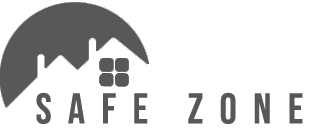
<style>
.page{position:relative;width:320px;height:132px;background:#ffffff}
.page>*{position:absolute;margin:0}
.t1{font:43px "BebasNeue-Regular";letter-spacing:0.38em;color:#58585a}
</style>
<div class="page">
<p class="t1" style="left:36px;top:92px;width:267px;height:32px">safe zone</p>
</div>
